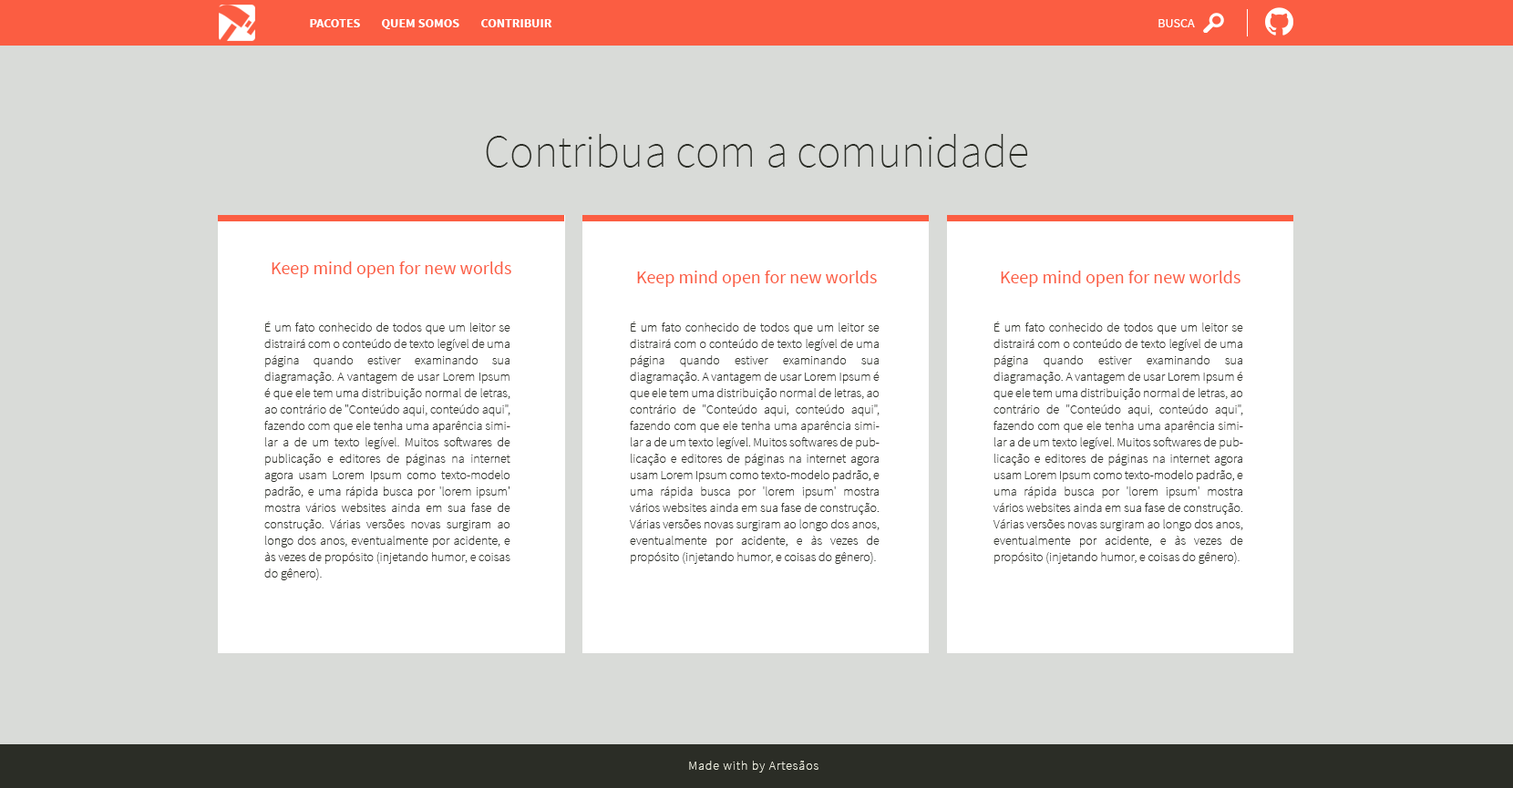
<style>
.page{position:relative;width:1513px;height:788px;background:#d9dbd8}
.page>*{position:absolute;margin:0}
.t1{font:12.8px "SourceSansPro-Bold";color:#ffffff}
.t2{font:12.8px "SourceSansPro-Regular";color:#ffffff}
.t3{font:45.6px "SourceSansPro-ExtraLight";color:#2b2d26}
.t4{font:18.2px "SourceSansPro-Regular";color:#fb5d42}
.t5{font:12.8px/16.4px "SourceSansPro-ExtraLight";color:#2b2d26}
.t6{font:12.8px "SourceSansPro-ExtraLight";letter-spacing:0.065em;color:#eceddf}
</style>
<div class="page">
<p class="t1" style="left:310px;top:19px;width:50px;height:8px">PACOTES</p>
<p class="t1" style="left:382px;top:19px;width:77px;height:10px">QUEM SOMOS</p>
<p class="t1" style="left:481px;top:19px;width:71px;height:8px">CONTRIBUIR</p>
<p class="t2" style="left:1158px;top:19px;width:37px;height:8px">BUSCA</p>
<p class="t3" style="left:486px;top:134px;width:542px;height:34px">Contribua com a comunidade</p>
<p class="t4" style="left:272px;top:262px;width:239px;height:16px">Keep mind open for new worlds</p>
<p class="t4" style="left:637px;top:271px;width:240px;height:16px">Keep mind open for new worlds</p>
<p class="t4" style="left:1001px;top:271px;width:239px;height:16px">Keep mind open for new worlds</p>
<p class="t5" style="left:264px;top:322px;width:246px;height:258px;text-align:justify">É um fato conhecido de todos que um leitor se distrairá com o conteúdo de texto legível de uma página quando estiver examinando sua diagramação. A vantagem de usar Lorem Ipsum é que ele tem uma distribuição normal de letras, ao contrário de "Conteúdo aqui, conteúdo aqui", fazendo com que ele tenha uma aparência similar a de um texto legível. Muitos softwares de publicação e editores de páginas na internet agora usam Lorem Ipsum como texto-modelo padrão, e uma rápida busca por 'lorem ipsum' mostra vários websites ainda em sua fase de construção. Várias versões novas surgiram ao longo dos anos, eventualmente por acidente, e às vezes de propósito (injetando humor, e coisas do gênero).</p>
<p class="t5" style="left:630px;top:322px;width:249px;height:242px;text-align:justify">É um fato conhecido de todos que um leitor se distrairá com o conteúdo de texto legível de uma página quando estiver examinando sua diagramação. A vantagem de usar Lorem Ipsum é que ele tem uma distribuição normal de letras, ao contrário de "Conteúdo aqui, conteúdo aqui", fazendo com que ele tenha uma aparência similar a de um texto legível. Muitos softwares de publicação e editores de páginas na internet agora usam Lorem Ipsum como texto-modelo padrão, e uma rápida busca por 'lorem ipsum' mostra vários websites ainda em sua fase de construção. Várias versões novas surgiram ao longo dos anos, eventualmente por acidente, e às vezes de propósito (injetando humor, e coisas do gênero).</p>
<p class="t5" style="left:993px;top:322px;width:250px;height:242px;text-align:justify">É um fato conhecido de todos que um leitor se distrairá com o conteúdo de texto legível de uma página quando estiver examinando sua diagramação. A vantagem de usar Lorem Ipsum é que ele tem uma distribuição normal de letras, ao contrário de "Conteúdo aqui, conteúdo aqui", fazendo com que ele tenha uma aparência similar a de um texto legível. Muitos softwares de publicação e editores de páginas na internet agora usam Lorem Ipsum como texto-modelo padrão, e uma rápida busca por 'lorem ipsum' mostra vários websites ainda em sua fase de construção. Várias versões novas surgiram ao longo dos anos, eventualmente por acidente, e às vezes de propósito (injetando humor, e coisas do gênero).</p>
<p class="t6" style="left:689px;top:761px;width:129px;height:12px">Made with by Artesãos</p>
</div>
